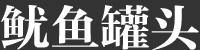
<style>
.page{position:relative;width:200px;height:50px;background:#333333}
.page>*{position:absolute;margin:0}
.t1{font:50px "FZCYSK--GBK1-0";color:#ffffff}
</style>
<div class="page">
<p class="t1" style="left:1px;top:5px;width:198px;height:45px">鱿鱼罐头</p>
</div>
